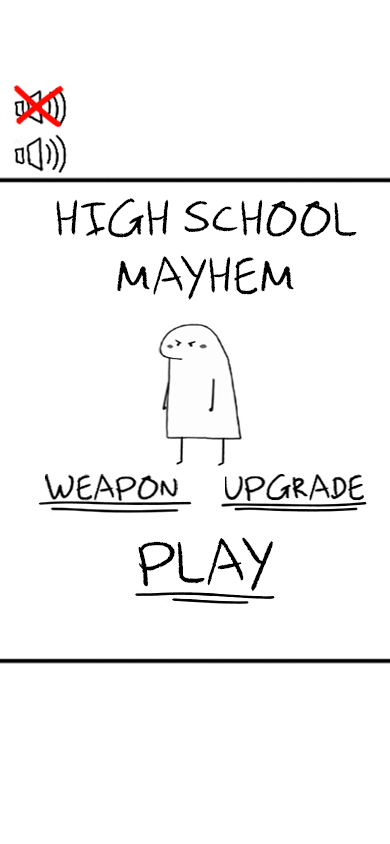
<style>
.page{position:relative;width:390px;height:844px;background:#ffffff}
.page>*{position:absolute;margin:0}
.t1{font:54px/7px "LTColoredPencil";letter-spacing:0.025em;color:#000000;scale:1.05 1}
.t2{font:65.9px "LTColoredPencil";letter-spacing:0.025em;color:#000000;scale:1.05 1}
</style>
<div class="page">
<p class="t1" style="left:56px;top:198px;width:301px;height:102px;text-align:center">HIGH SCHOOL <br><br><br><br><br><br><br><br>MAYHEM</p>
<p class="t2" style="left:138px;top:537px;width:135px;height:55px">PLAY</p>
</div>
